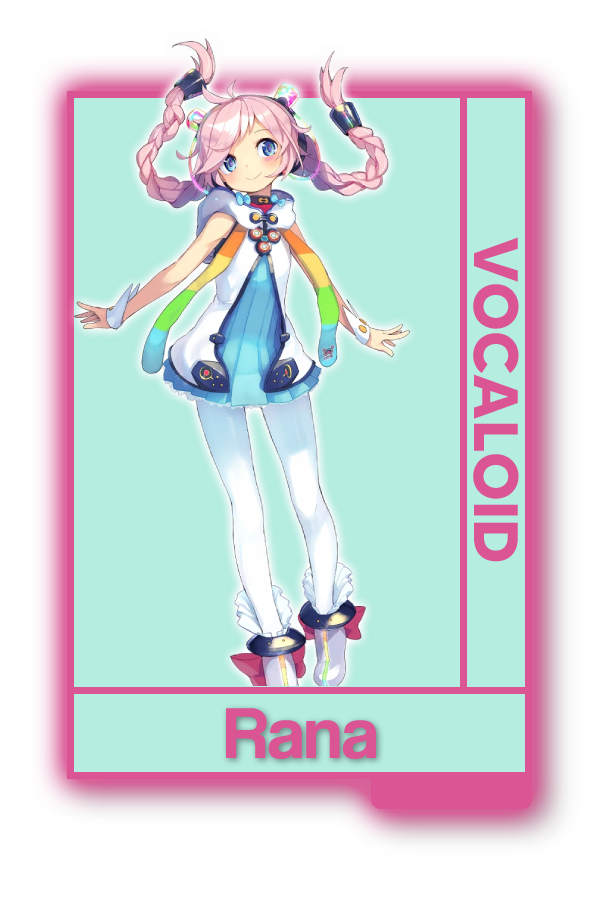
<style>
.page{position:relative;width:600px;height:900px;background:#b5ede1}
.page>*{position:absolute;margin:0}
.t1{font:62.5px "MADETOMMY-Bold";color:#db5493}
.t2{font:75px "CoolveticaRg-Regular";color:#db5493}
</style>
<div class="page">
<p class="t1" style="left:473px;top:237px;width:46px;height:325px;rotate:90deg">VOCALOID</p>
<p class="t2" style="left:226px;top:708px;width:151px;height:51px">Rana</p>
</div>
